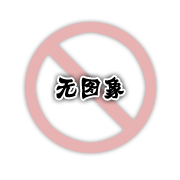
<style>
.page{position:relative;width:180px;height:180px;background:#ffffff}
.page>*{position:absolute;margin:0}
.t1{font:24px "JYanLin";color:#000000}
</style>
<div class="page">
<p class="t1" style="left:56px;top:76px;width:68px;height:24px">无图象</p>
</div>
